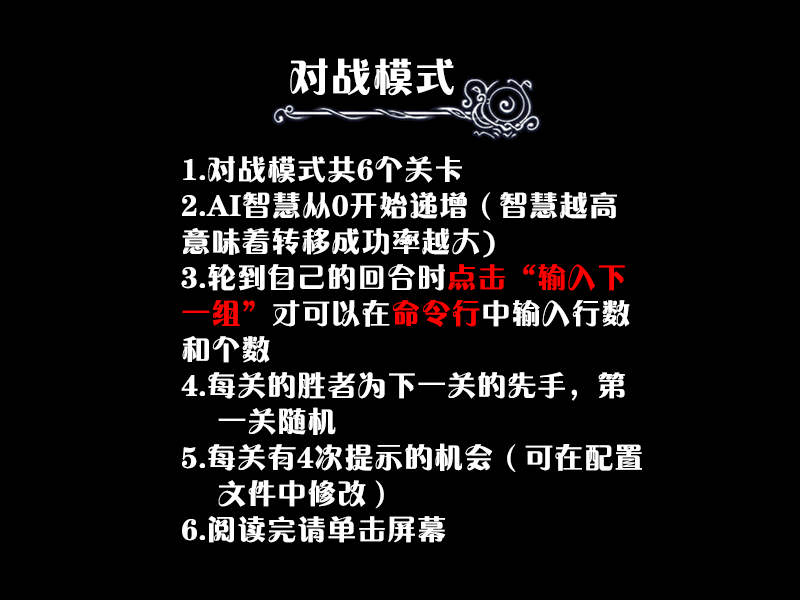
<style>
.page{position:relative;width:800px;height:600px;background:#000000}
.page>*{position:absolute;margin:0}
.t1{font:42px "FZCHYJW--GB1-0";color:#ffffff;font-variant:small-caps}
.t2{font:30px/36px "FZCHYJW--GB1-0";color:#ffffff;font-variant:small-caps}
.t3{font:30px/36px "FZCHYJW--GB1-0";color:#ff0000;font-variant:small-caps}
</style>
<div class="page">
<p class="t1" style="left:290px;top:58px;width:164px;height:38px">对战模式</p>
<p class="t2" style="left:181px;top:156px;width:461px;height:387px">1.对战模式共6个关卡<br>2.AI智慧从0开始递增（智慧越高<br>意味着转移成功率越大)<br>3.轮到自己的回合时<span class="t3">点击“输入下<br>一组”</span>才可以在<span class="t3">命令行</span>中输入行数<br>和个数<br>4.每关的胜者为下一关的先手，第<br> 一关随机<br>5.每关有4次提示的机会（可在配置<br> 文件中修改）<br>6.阅读完请单击屏幕</p>
</div>
